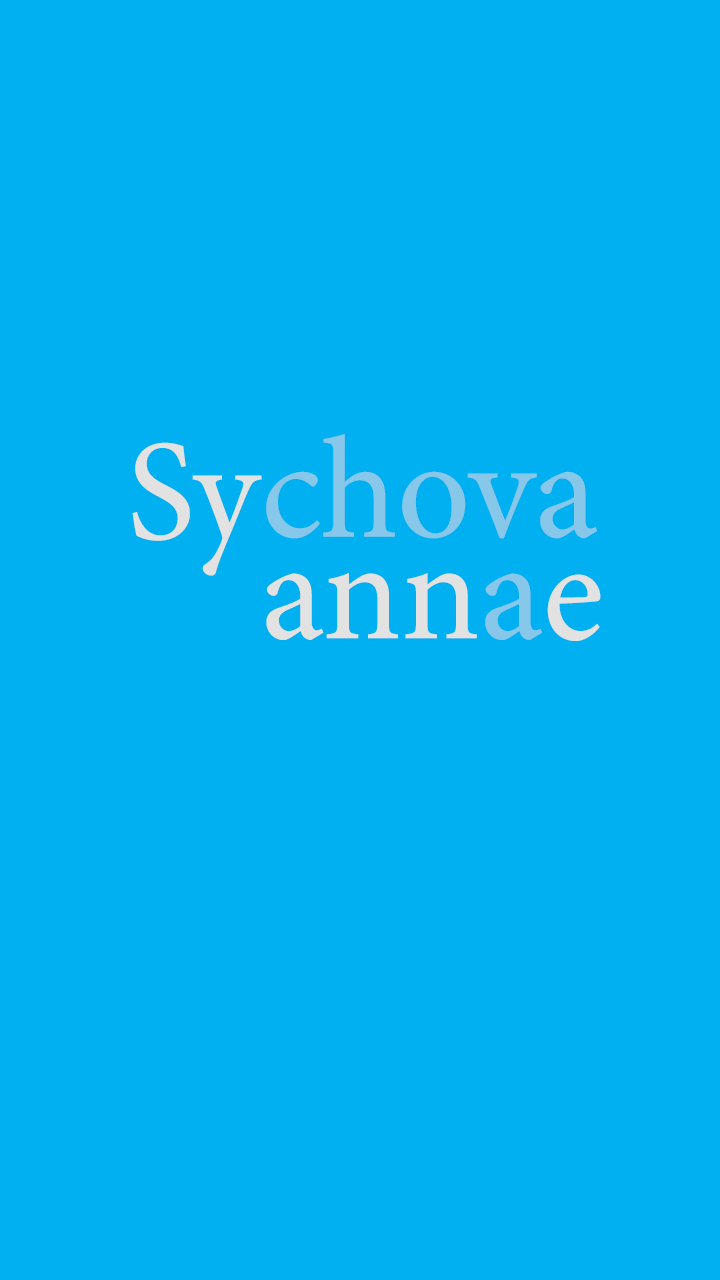
<style>
.page{position:relative;width:720px;height:1280px;background:#00b0f0}
.page>*{position:absolute;margin:0}
.t1{font:143.8px "MinionPro-Regular";color:#86c7ea}
.t2{font:143.8px "MinionPro-Regular";color:#e2e2e2}
</style>
<div class="page">
<p class="t1" style="left:266px;top:434px;width:331px;height:105px">chova</p>
<p class="t2" style="left:132px;top:442px;width:130px;height:134px">Sy</p>
<p class="t2" style="left:266px;top:573px;width:211px;height:67px">ann</p>
<p class="t1" style="left:485px;top:573px;width:57px;height:67px">a</p>
<p class="t2" style="left:547px;top:574px;width:54px;height:67px">e</p>
</div>
